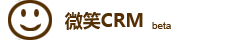
<style>
.page{position:relative;width:248px;height:40px;background:#ffffff}
.page>*{position:absolute;margin:0}
.t1{font:18px "MicrosoftYaHei-Bold";color:#553005}
.t2{font:10px "ArialMT";color:#553005}
</style>
<div class="page">
<p class="t1" style="left:64px;top:12px;width:79px;height:18px">微笑CRM</p>
<p class="t2" style="left:152px;top:22px;width:19px;height:7px">beta</p>
</div>
